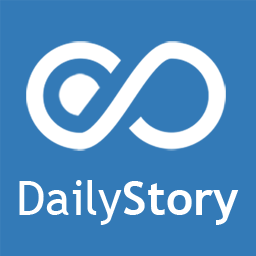
<style>
.page{position:relative;width:256px;height:256px;background:#337ab7}
.page>*{position:absolute;margin:0}
.t1{font:48px "TrebuchetMS";color:#ffffff}
.t2{font:48px "TrebuchetMS-Bold";color:#ffffff}
</style>
<div class="page">
<p class="t1" style="left:19px;top:180px;width:220px;height:45px">Daily<span class="t2">Story</span></p>
</div>
